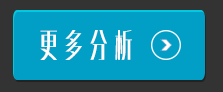
<style>
.page{position:relative;width:223px;height:92px;background:#019fc6}
.page>*{position:absolute;margin:0}
.t1{font:30px "MFXingHei_Noncommercial-Bold";color:#ffffff}
</style>
<div class="page">
<p class="t1" style="left:40px;top:30px;width:92px;height:30px">更 多 分 析</p>
</div>
